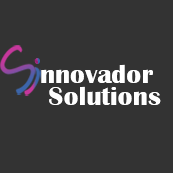
<style>
.page{position:relative;width:173px;height:173px;background:#333333}
.page>*{position:absolute;margin:0}
.t1{font:27px "BritannicBold";color:#ffffff}
</style>
<div class="page">
<p class="t1" style="left:41px;top:64px;width:112px;height:19px">nnovador</p>
<p class="t1" style="left:49px;top:86px;width:112px;height:19px">Solutions</p>
</div>
